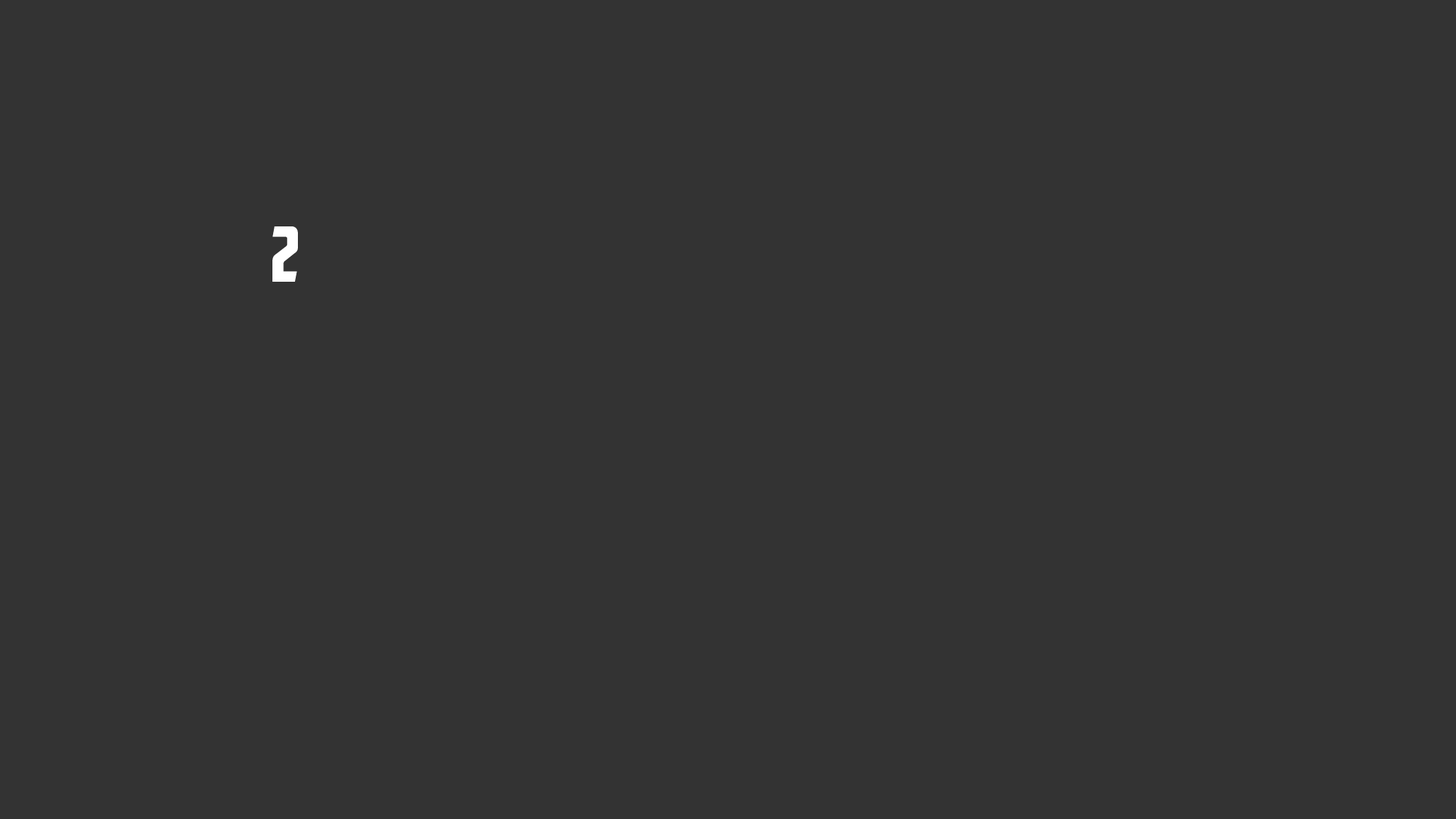
<style>
.page{position:relative;width:1456px;height:819px;background:#333333}
.page>*{position:absolute;margin:0}
.t1{font:75.9px "AmericanCaptain";color:#ffffff}
</style>
<div class="page">
<p class="t1" style="left:272px;top:226px;width:26px;height:56px">2</p>
</div>
